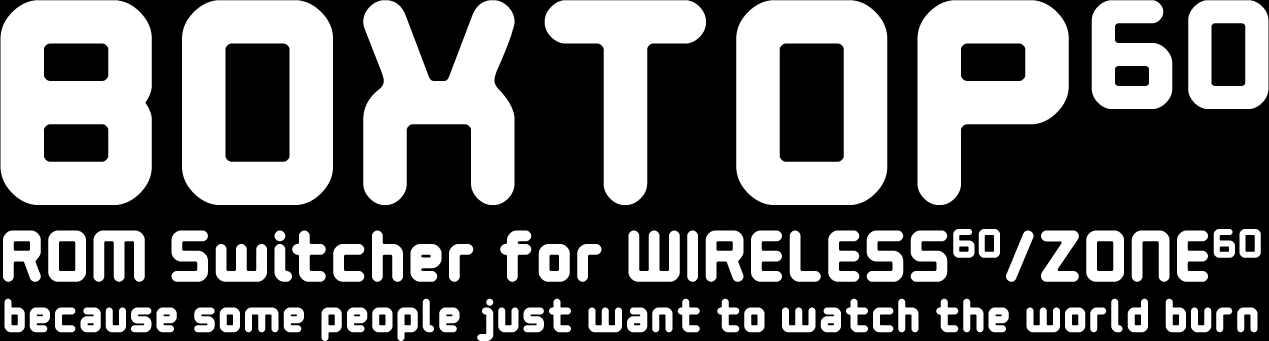
<style>
.page{position:relative;width:1269px;height:341px;background:#000000}
.page>*{position:absolute;margin:0}
.t1{font:42px "AtaribabyBold";color:#ffffff}
.t2{font:256px "AtaribabyBold";color:#ffffff}
.t3{font:136px "AtaribabyBold";color:#ffffff}
.t4{font:64px "AtaribabyBold";color:#ffffff}
.t5{font:36px "AtaribabyBold";color:#ffffff}
</style>
<div class="page">
<p class="t1" style="left:0px;top:0px;width:1269px;height:341px;text-align:center"><span class="t2">BOXTOP</span><span class="t3">60<br></span><span class="t4">ROM Switcher for WIRELESS</span><span class="t5">60</span><span class="t4">/ZONE</span><span class="t5">60<br></span>because some people just want to watch the world burn</p>
</div>
